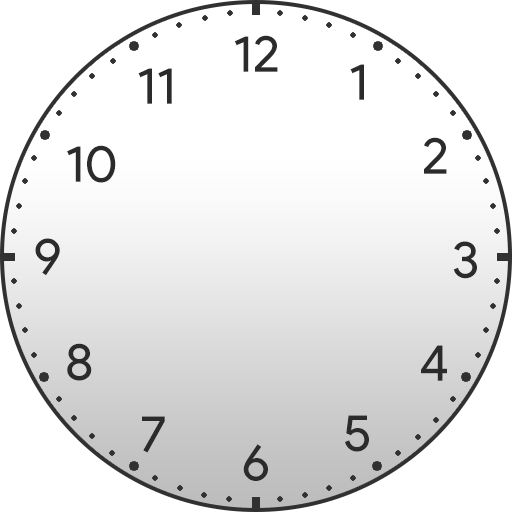
<style>
.page{position:relative;width:512px;height:512px;background:#ffffff}
.page>*{position:absolute;margin:0}
.t1{font:51.5px "ProductSans";color:#2b2b2b}
</style>
<div class="page">
<p class="t1" style="left:234px;top:35px;width:44px;height:37px">12</p>
<p class="t1" style="left:350px;top:64px;width:14px;height:36px">1</p>
<p class="t1" style="left:138px;top:68px;width:34px;height:36px">11</p>
<p class="t1" style="left:424px;top:137px;width:23px;height:37px">2</p>
<p class="t1" style="left:67px;top:145px;width:49px;height:38px">10</p>
<p class="t1" style="left:35px;top:238px;width:25px;height:38px">9</p>
<p class="t1" style="left:453px;top:241px;width:24px;height:38px">3</p>
<p class="t1" style="left:67px;top:343px;width:25px;height:38px">8</p>
<p class="t1" style="left:421px;top:345px;width:26px;height:36px">4</p>
<p class="t1" style="left:142px;top:416px;width:23px;height:37px">7</p>
<p class="t1" style="left:345px;top:415px;width:24px;height:37px">5</p>
<p class="t1" style="left:243px;top:444px;width:25px;height:37px">6</p>
</div>
